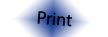
<style>
.page{position:relative;width:108px;height:37px;background:#ffffff}
.page>*{position:absolute;margin:0}
.t1{font:18px "MyriadPro-Regular";color:#020201}
</style>
<div class="page">
<p class="t1" style="left:37px;top:11px;width:35px;height:16px;rotate:5deg">Print</p>
</div>
